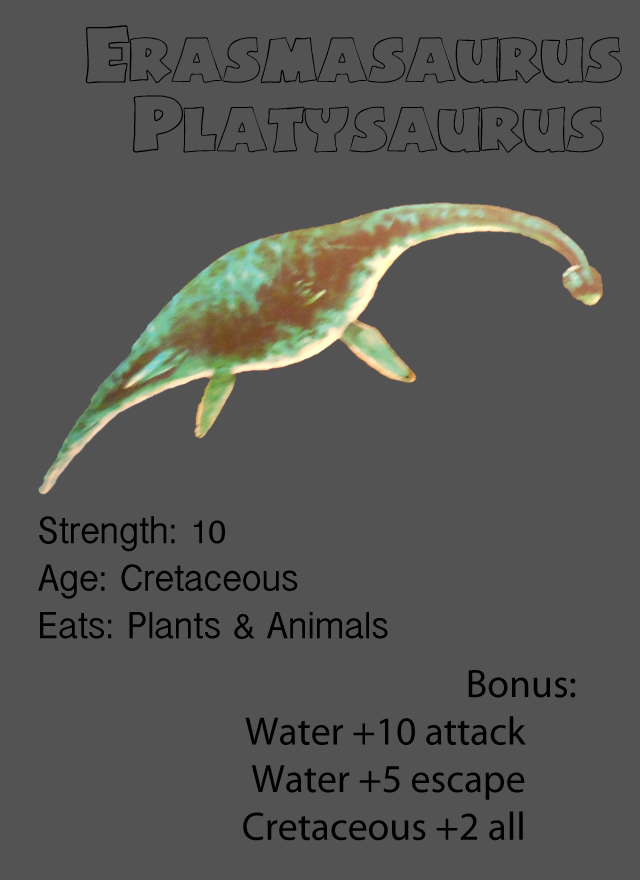
<style>
.page{position:relative;width:640px;height:880px;background:#535353}
.page>*{position:absolute;margin:0}
.t1{font:58px "BasicFont";color:#000000}
.t2{font:39.7px "InaiMathi";color:#000000}
.t3{font:39.7px "MyriadPro-Regular";color:#000000}
</style>
<div class="page">
<p class="t1" style="left:85px;top:25px;width:537px;height:128px;text-align:center">Erasmasaurus <br>Platysaurus</p>
<p class="t2" style="left:38px;top:516px;width:350px;height:123px">Strength: 10<br>Age: Cretaceous<br>Eats: Plants &amp; Animals</p>
<p class="t3" style="left:243px;top:670px;width:333px;height:171px;text-align:center">Bonus: <br>Water +10 attack<br>Water +5 escape<br>Cretaceous +2 all</p>
</div>
